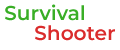
<style>
.page{position:relative;width:120px;height:50px;background:#ffffff}
.page>*{position:absolute;margin:0}
.t1{font:20px "Montserrat-SemiBold";color:#39ae26}
.t2{font:20px "Montserrat-SemiBold";color:#da2c2c}
</style>
<div class="page">
<p class="t1" style="left:5px;top:4px;width:79px;height:17px">Survival</p>
<p class="t2" style="left:35px;top:25px;width:80px;height:16px">Shooter</p>
</div>
